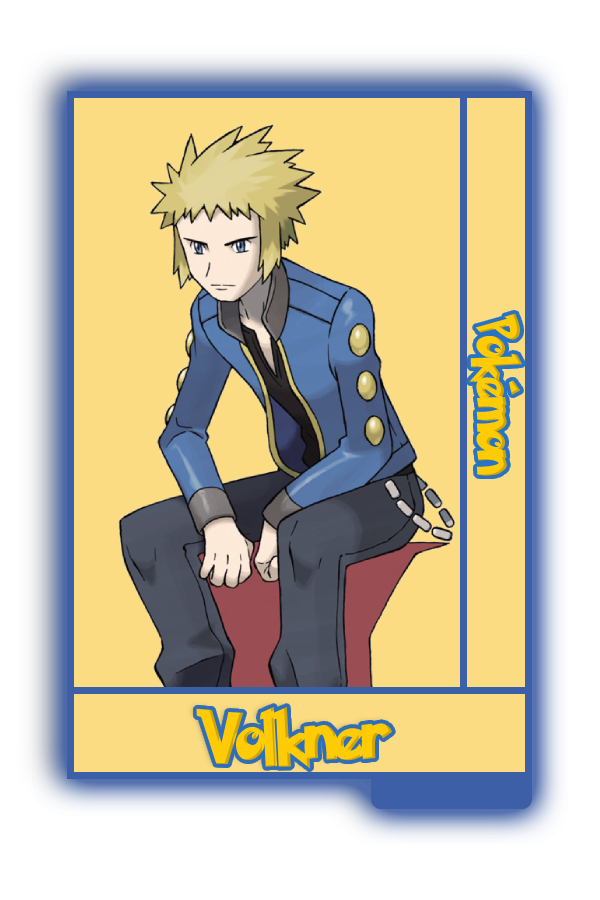
<style>
.page{position:relative;width:600px;height:900px;background:#fbdc83}
.page>*{position:absolute;margin:0}
.t1{font:48.8px "PokemonSolidNormal";color:#ffcb05;scale:0.8 1}
.t2{font:56.6px "PokemonSolidNormal";color:#ffcb05;scale:0.92 1}
</style>
<div class="page">
<p class="t1" style="left:469px;top:313px;width:54px;height:163px;rotate:90deg">Pokémon</p>
<p class="t2" style="left:196px;top:706px;width:196px;height:63px">Volkner</p>
</div>
